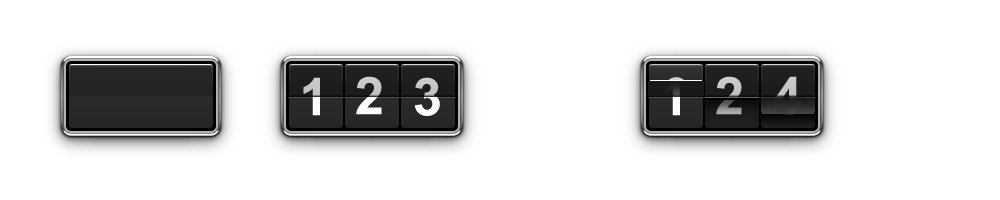
<style>
.page{position:relative;width:1000px;height:200px;background:#ffffff}
.page>*{position:absolute;margin:0}
.t1{font:52px "Arial-BoldMT"}
</style>
<div class="page">
<p class="t1" style="left:303px;top:77px;width:17px;height:39px">1</p>
<p class="t1" style="left:356px;top:76px;width:26px;height:39px">2</p>
<p class="t1" style="left:414px;top:77px;width:26px;height:39px">3</p>
<p class="t1" style="left:663px;top:77px;width:17px;height:39px">1</p>
<p class="t1" style="left:716px;top:76px;width:26px;height:39px">2</p>
<p class="t1" style="left:773px;top:76px;width:28px;height:39px">4</p>
</div>
